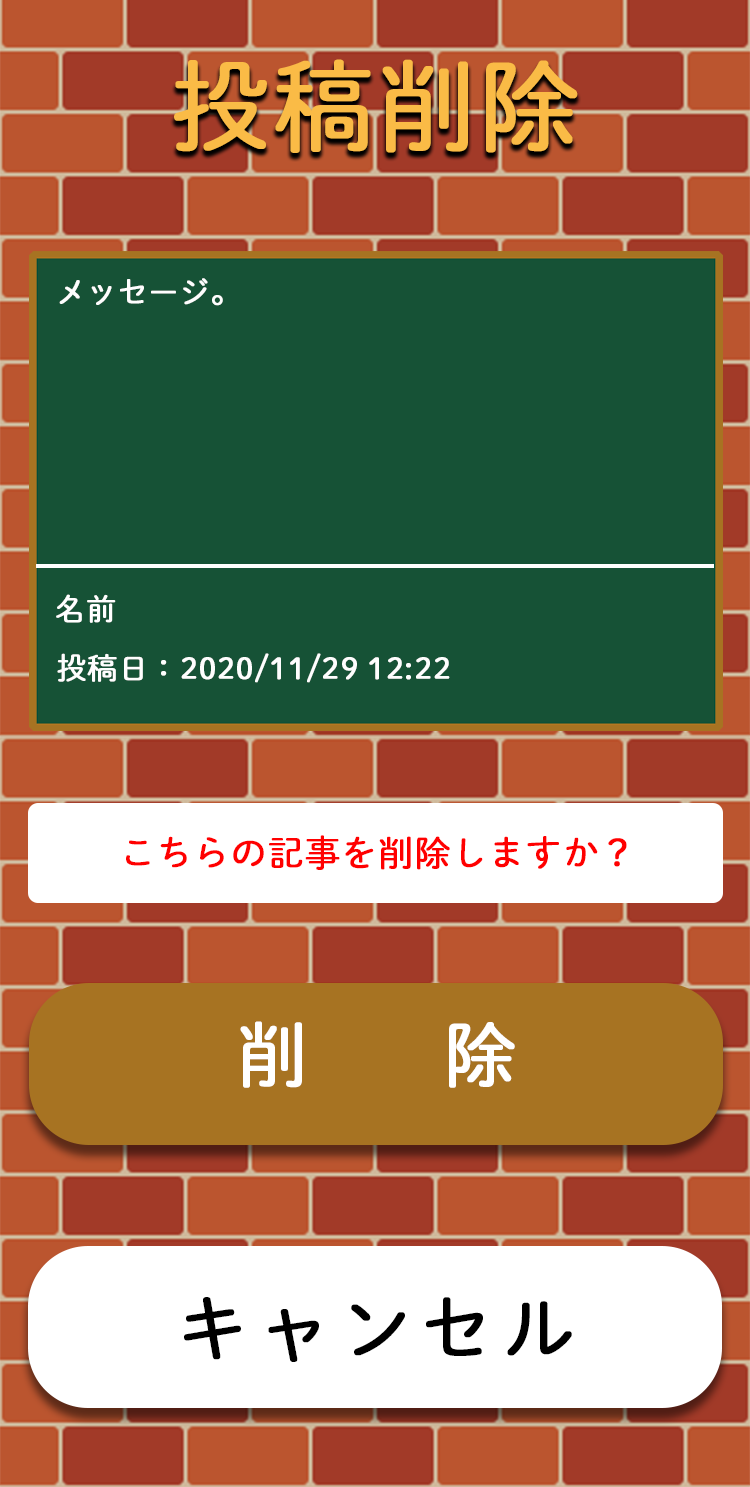
<style>
.page{position:relative;width:750px;height:1487px;background:#165236}
.page>*{position:absolute;margin:0}
.t1{font:100px "DNPShueiMGoStd-L";color:#fabb46;font-weight:bold}
.t2{font:30px "DNPShueiMGoStd-L";color:#fefefe;font-weight:bold}
.t3{font:30px "DNPShueiMGoStd-L";color:#ffffff;font-weight:bold}
.t4{font:36px "DNPShueiMGoStd-L";color:#ff0000;font-weight:bold}
.t5{font:72px "DNPShueiMGoStd-L";color:#ffffff;font-weight:bold}
.t6{font:72px "DNPShueiMGoStd-L";color:#000000;font-weight:bold}
</style>
<div class="page">
<p class="t1" style="left:174px;top:59px;width:404px;height:94px">投稿削除</p>
<p class="t2" style="left:59px;top:278px;width:164px;height:28px">メッセージ。</p>
<p class="t3" style="left:56px;top:594px;width:60px;height:29px">名前</p>
<p class="t2" style="left:57px;top:653px;width:393px;height:30px">投稿日：2020/11/29 12:22</p>
<p class="t4" style="left:126px;top:835px;width:501px;height:35px">こちらの記事を削除しますか？</p>
<p class="t5" style="left:240px;top:1021px;width:275px;height:67px">削除</p>
<p class="t6" style="left:184px;top:1297px;width:388px;height:65px">キャンセル</p>
</div>
